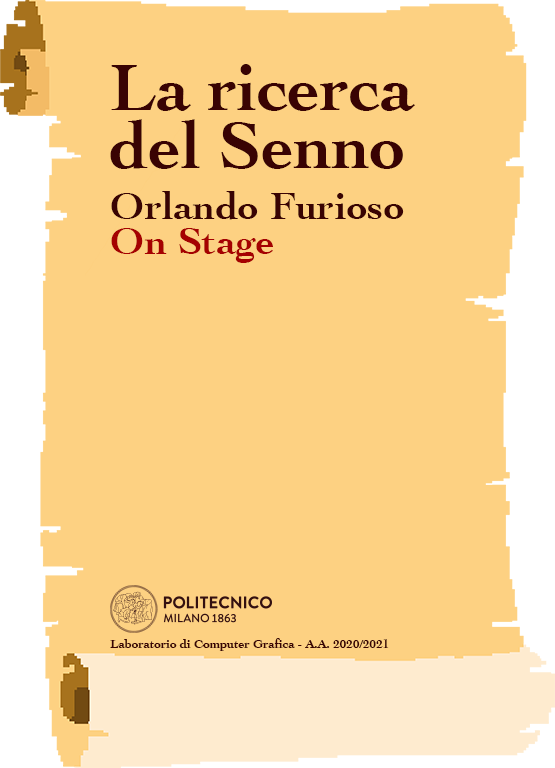
<style>
.page{position:relative;width:555px;height:768px;background:#fdd182}
.page>*{position:absolute;margin:0}
.t1{font:69.2px/58.3px "Cochin-Bold";color:#390303}
.t2{font:40.3px/50.7px "Cochin-Bold";color:#390303}
.t3{font:40.3px/34.9px "Cochin-Bold";color:#a50101}
.t4{font:12.7px "Cochin-Bold";color:#390303}
</style>
<div class="page">
<p class="t1" style="left:110px;top:64px;width:305px;height:199px">La ricerca <br>del Senno<br><span class="t2">Orlando Furioso<br></span><span class="t3">On Stage</span></p>
<p class="t4" style="left:110px;top:638px;width:279px;height:13px">Laboratorio di Computer Grafica - A.A. 2020/2021</p>
</div>
